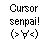
<style>
.page{position:relative;width:50px;height:50px;background:#ffffff}
.page>*{position:absolute;margin:0}
.t1{font:10.7px "ArialNarrow";color:#000000}
.t2{font:10.7px "KozGoPr6N-Regular";color:#000000}
</style>
<div class="page">
<p class="t1" style="left:10px;top:4px;width:29px;height:35px">Cursor senpai!<br><span class="t2">（</span>&gt;<span class="t2">∀</span>&lt;<span class="t2">）</span></p>
</div>
